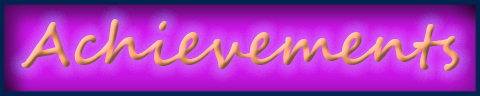
<style>
.page{position:relative;width:480px;height:96px}
.page>*{position:absolute;margin:0}
.t1{font:59.6px "SegoeScript-Bold"}
</style>
<div class="page">
<p class="t1" style="left:21px;top:19px;width:439px;height:52px">Achievements</p>
</div>
